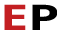
<style>
.page{position:relative;width:57px;height:33px;background:#ffffff}
.page>*{position:absolute;margin:0}
.t1{font:35.3px "OpenSans-Bold";color:#c31f22;scale:1.42 1}
.t2{font:35.3px "OpenSans-Bold";color:#010101;scale:1.42 1}
</style>
<div class="page">
<p class="t1" style="left:4px;top:4px;width:54px;height:26px">E<span class="t2">P</span></p>
</div>
